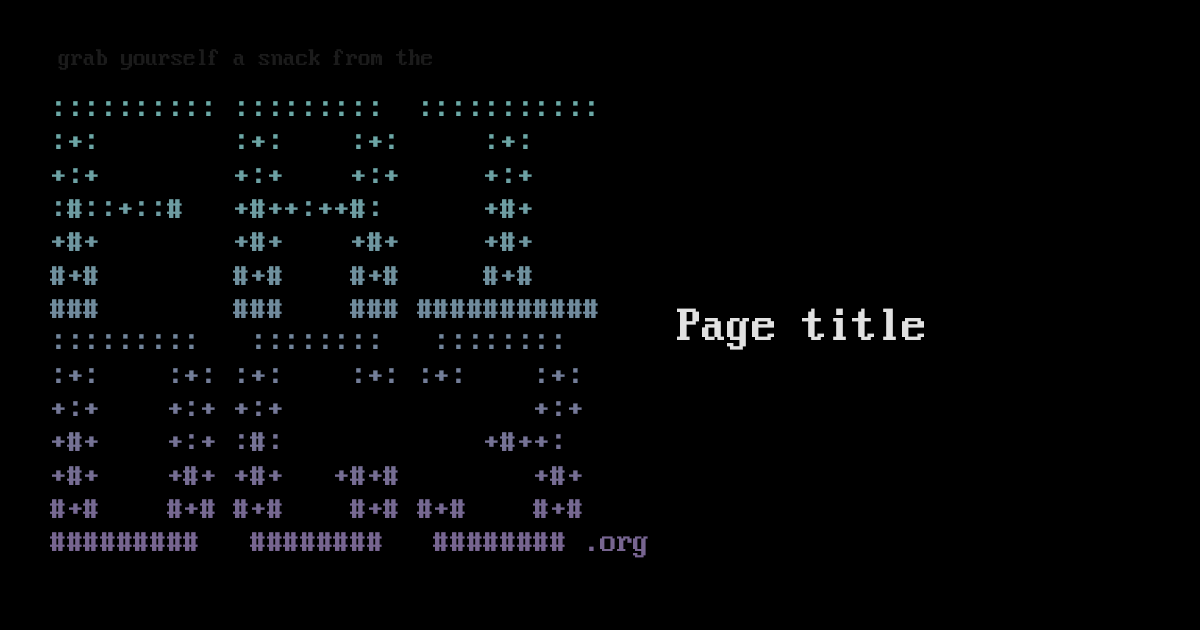
<style>
.page{position:relative;width:1200px;height:630px;background:#000000}
.page>*{position:absolute;margin:0}
.t1{font:25px "Mx437_IBM_VGA_8x16";color:#1b1b1b}
.t2{font:33.3px/33.3px "Mx437_IBM_VGA_8x16"}
.t3{font:50px "Mx437_IBM_VGA_8x16";color:#e2e2e2}
</style>
<div class="page">
<p class="t1" style="left:58px;top:49px;width:374px;height:21px">grab yourself a snack from the</p>
<p class="t2" style="left:50px;top:101px;width:598px;height:457px;text-align:center">:::::::::: :::::::::  :::::::::::<br>:+:        :+:    :+:     :+:    <br>+:+        +:+    +:+     +:+    <br>:#::+::#   +#++:++#:      +#+    <br>+#+        +#+    +#+     +#+    <br>#+#        #+#    #+#     #+#    <br>###        ###    ### ###########<br>:::::::::   ::::::::   ::::::::  <br>:+:    :+: :+:    :+: :+:    :+: <br>+:+    +:+ +:+               +:+ <br>+#+    +:+ :#:            +#++:  <br>+#+    +#+ +#+   +#+#        +#+ <br>#+#    #+# #+#    #+# #+#    #+# <br>   #########   ########   ######## .org</p>
<p class="t3" style="left:677px;top:308px;width:247px;height:42px">Page title</p>
</div>
